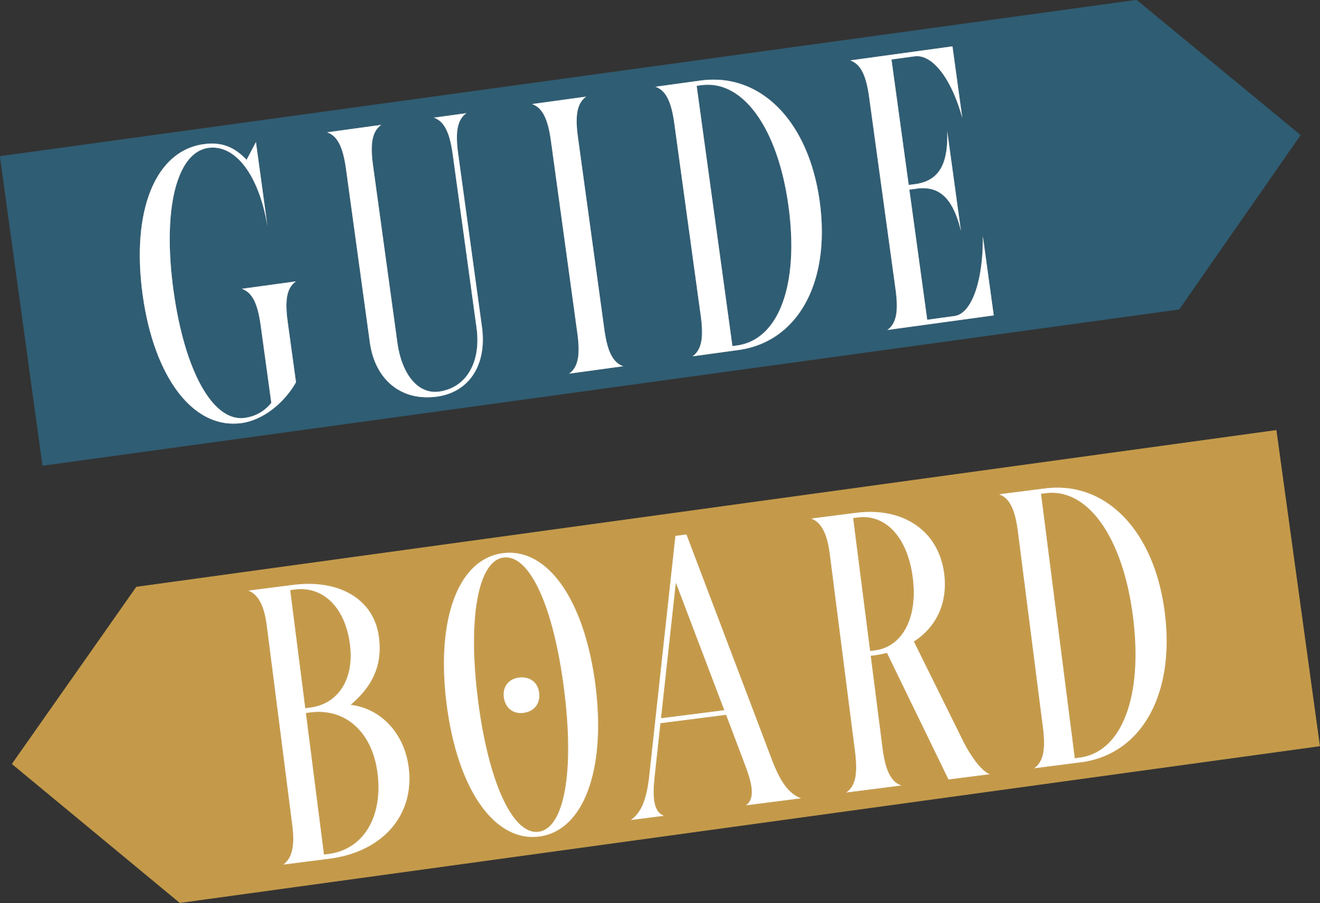
<style>
.page{position:relative;width:1320px;height:903px;background:#333333}
.page>*{position:absolute;margin:0}
.t1{font:388.8px "ITCalixonDemo-Regular";color:#ffffff}
.t2{font:394.6px "ITCalixonDemo-Regular";color:#ffffff}
</style>
<div class="page">
<p class="t1" style="left:139px;top:46px;width:855px;height:378px;rotate:-8deg">GUIDE</p>
<p class="t2" style="left:248px;top:487px;width:919px;height:378px;rotate:-7deg">BOARD</p>
</div>
